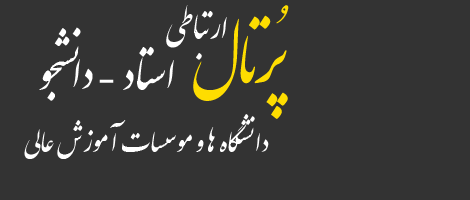
<style>
.page{position:relative;width:470px;height:200px;background:#333333}
.page>*{position:absolute;margin:0}
.t1{font:36px "IranNastaliq";color:#ffffff}
.t2{font:70px "IranNastaliq";color:#fedd00}
.t3{font:48px "IranNastaliq";color:#ffffff}
.t4{font:30px "IranNastaliq";color:#ffffff}
</style>
<div class="page">
<p class="t1" style="left:166px;top:5px;width:61px;height:55px">ارتباطي</p>
<p class="t2" style="left:193px;top:5px;width:96px;height:114px">پُرتـال</p>
<p class="t3" style="left:39px;top:27px;width:42px;height:74px">نشجو</p>
<p class="t3" style="left:99px;top:46px;width:75px;height:44px">استاد -</p>
<p class="t3" style="left:73px;top:59px;width:20px;height:30px">دا</p>
<p class="t4" style="left:24px;top:114px;width:245px;height:45px">دانشگاه ها و موسسات آموزش عالي</p>
</div>
